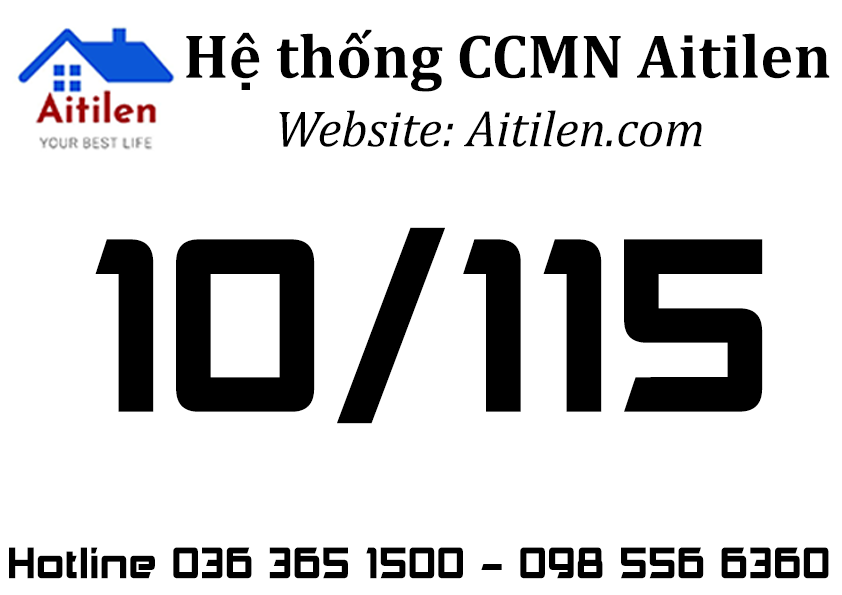
<style>
.page{position:relative;width:842px;height:595px;background:#ffffff}
.page>*{position:absolute;margin:0}
.t1{font:62.9px "Cambria-Bold";color:#000000}
.t2{font:51.3px "Cambria-Italic";color:#000000}
.t3{font:235.3px "UTM-Akashi";color:#000000}
.t4{font:42.1px "UTM-Akashi";color:#000000}
</style>
<div class="page">
<p class="t1" style="left:186px;top:29px;width:644px;height:63px">Hệ thống CCMN Aitilen</p>
<p class="t2" style="left:279px;top:110px;width:423px;height:37px">Website: Aitilen.com</p>
<p class="t3" style="left:95px;top:227px;width:668px;height:197px">10/115</p>
<p class="t4" style="left:9px;top:547px;width:820px;height:32px">Hotline 036 365 1500 - 098 556 6360</p>
</div>
